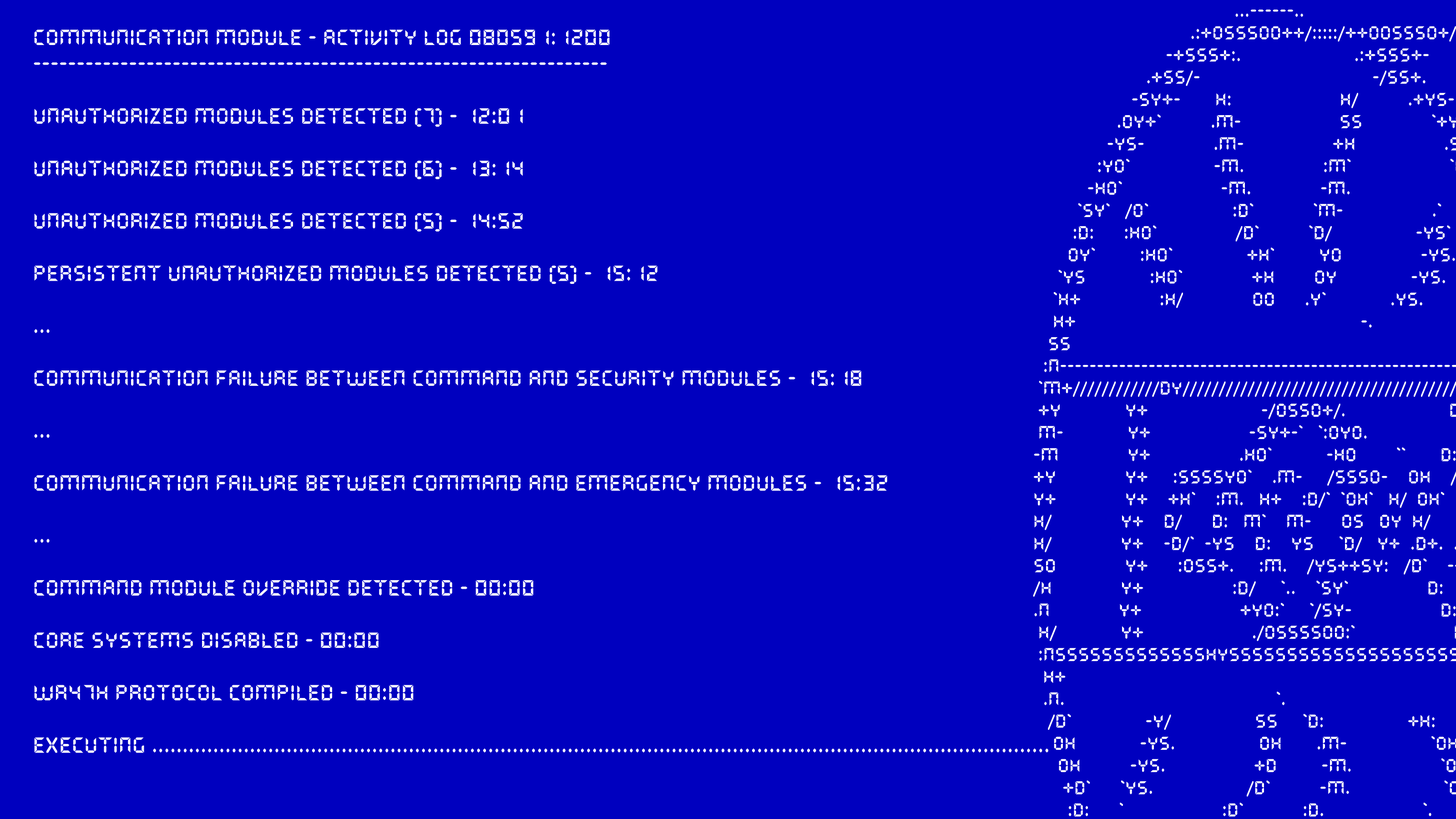
<style>
.page{position:relative;width:1456px;height:819px;background:#0000bf}
.page>*{position:absolute;margin:0}
.t1{font:21.8px "QuartzMS";color:#ffffff}
</style>
<div class="page">
<p class="t1" style="left:34px;top:30px;width:1014px;height:723px">Communication module - activity log 080591:1200<br>------------------------------------------------------------------<br><br>Unauthorized modules detected (7) - 12:01<br><br>unauthorized modules detected (6) - 13:14<br><br>unauthorized modules detected (5) - 14:52<br><br>Persistent unauthorized modules detected (5) - 15:12<br><br>...<br><br>Communication failure between command and security modules - 15:18<br><br>...<br><br>Communication failure between command and emergency modules - 15:32<br><br>...<br><br>command module override detected - 00:00<br><br>core systems disabled - 00:00<br><br>wr47h protocol compiled - 00:00<br><br>executing ...................................................................................................................................................</p>
</div>
